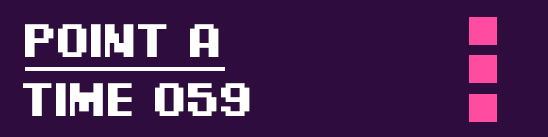
<style>
.page{position:relative;width:548px;height:137px;background:#2e0c3d}
.page>*{position:absolute;margin:0}
.t1{font:48px "PixelDigivolve";color:#ffffff;text-transform:uppercase}
</style>
<div class="page">
<p class="t1" style="left:25px;top:24px;width:194px;height:33px">point a</p>
<p class="t1" style="left:23px;top:83px;width:227px;height:33px">time 059</p>
</div>
